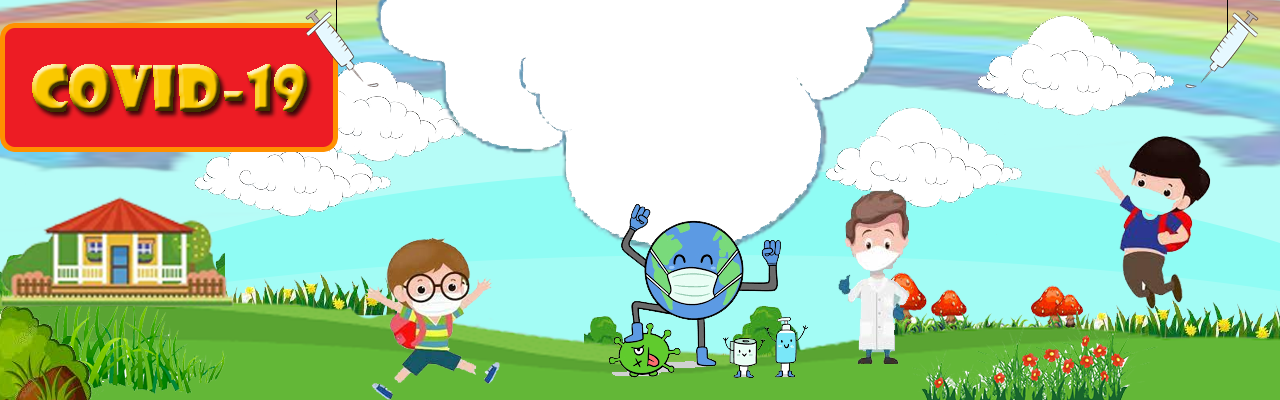
<style>
.page{position:relative;width:1280px;height:400px;background:#ffffff}
.page>*{position:absolute;margin:0}
.t1{font:60px "ShowcardGothic-Reg";font-weight:bold}
</style>
<div class="page">
<p class="t1" style="left:32px;top:64px;width:275px;height:48px">covid-19</p>
</div>
